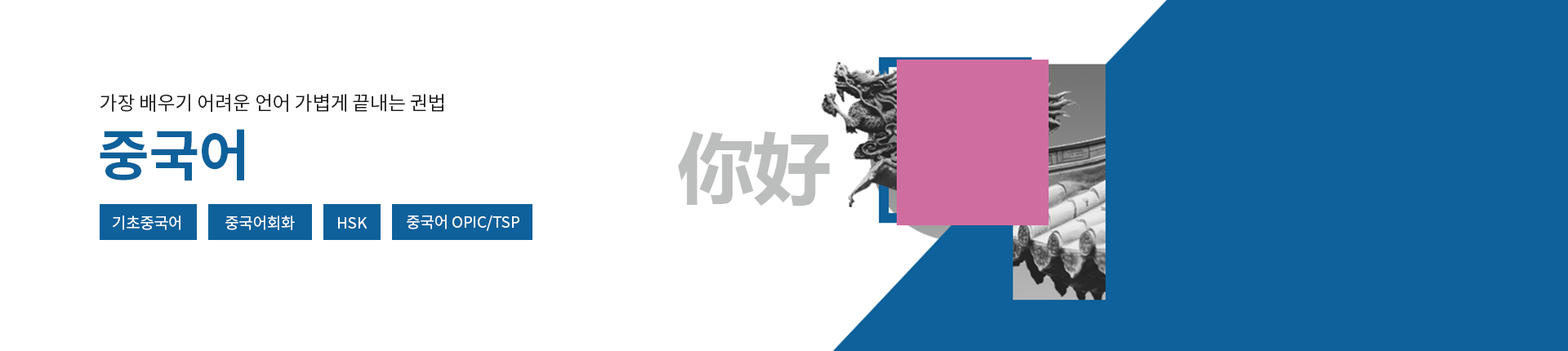
<style>
.page{position:relative;width:1568px;height:351px;background:#ffffff}
.page>*{position:absolute;margin:0}
.t1{font:19.6px "NotoSansCJKkr-Regular";letter-spacing:-0.01em;color:#181818}
.t2{font:55.5px "NotoSansCJKkr-Bold";letter-spacing:-0.01em;color:#0e619b}
.t3{font:77.2px "MicrosoftYaHei-Bold";letter-spacing:-0.01em;color:#bcbdbd}
.t4{font:15.5px "NotoSansCJKkr-Regular";letter-spacing:-0.01em;color:#fefefe}
</style>
<div class="page">
<p class="t1" style="left:100px;top:94px;width:343px;height:18px">가장 배우기 어려운 언어 가볍게 끝내는 권법</p>
<p class="t2" style="left:100px;top:129px;width:144px;height:52px">중국어</p>
<p class="t3" style="left:678px;top:131px;width:152px;height:75px">你好</p>
<p class="t4" style="left:113px;top:216px;width:67px;height:14px">기초중국어</p>
<p class="t4" style="left:225px;top:216px;width:70px;height:14px">중국어회화</p>
<p class="t4" style="left:338px;top:217px;width:29px;height:12px">HSK</p>
<p class="t4" style="left:407px;top:215px;width:112px;height:16px">중국어 OPIC/TSP</p>
</div>
